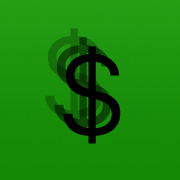
<style>
.page{position:relative;width:180px;height:180px}
.page>*{position:absolute;margin:0}
.t1{font:120.5px "SanFranciscoDisplay-Regular"}
.t2{font:120.5px "SanFranciscoDisplay-Regular";color:#000000}
</style>
<div class="page">
<p class="t1" style="left:54px;top:37px;width:58px;height:98px">$</p>
<p class="t2" style="left:63px;top:46px;width:58px;height:98px">$</p>
</div>
